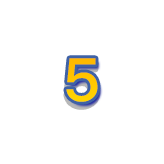
<style>
.page{position:relative;width:164px;height:164px;background:#ffffff}
.page>*{position:absolute;margin:0}
.t1{font:59.8px "PingFangHK-Semibold";color:#ffc400;text-transform:uppercase}
</style>
<div class="page">
<p class="t1" style="left:66px;top:58px;width:32px;height:44px">5</p>
</div>
